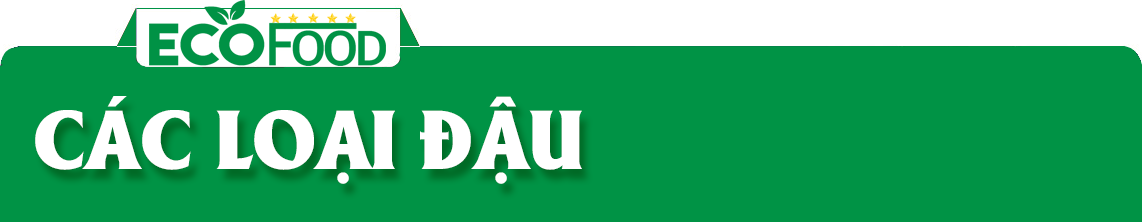
<style>
.page{position:relative;width:1142px;height:222px;background:#009345}
.page>*{position:absolute;margin:0}
.t1{font:81px "UTM-Alberta-Heavy";color:#ffffff}
</style>
<div class="page">
<p class="t1" style="left:35px;top:96px;width:547px;height:88px">CÁC LOẠI ĐẬU</p>
</div>
